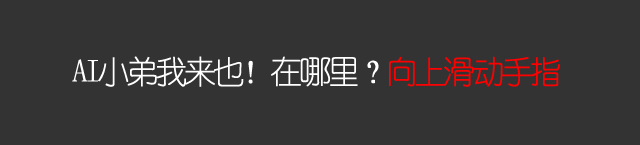
<style>
.page{position:relative;width:640px;height:145px;background:#333333}
.page>*{position:absolute;margin:0}
.t1{font:32px "YouYuan";letter-spacing:-0.1em;color:#ffffff}
.t2{font:32px "YouYuan";letter-spacing:-0.1em;color:#ff0000}
</style>
<div class="page">
<p class="t1" style="left:72px;top:56px;width:488px;height:31px">AI小弟我来也！在哪里？<span class="t2">向上滑动手指</span></p>
</div>
